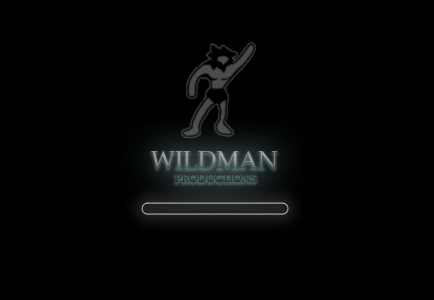
<style>
.page{position:relative;width:434px;height:300px;background:#000000}
.page>*{position:absolute;margin:0}
.t1{font:11px "PalatinoLinotype-Roman"}
.t2{font:24px "PalatinoLinotype-Roman"}
</style>
<div class="page">
<p class="t1" style="left:151px;top:151px;width:127px;height:31px"><span class="t2">WILDMAN<br></span>                                               PRODUCTIONS</p>
</div>
